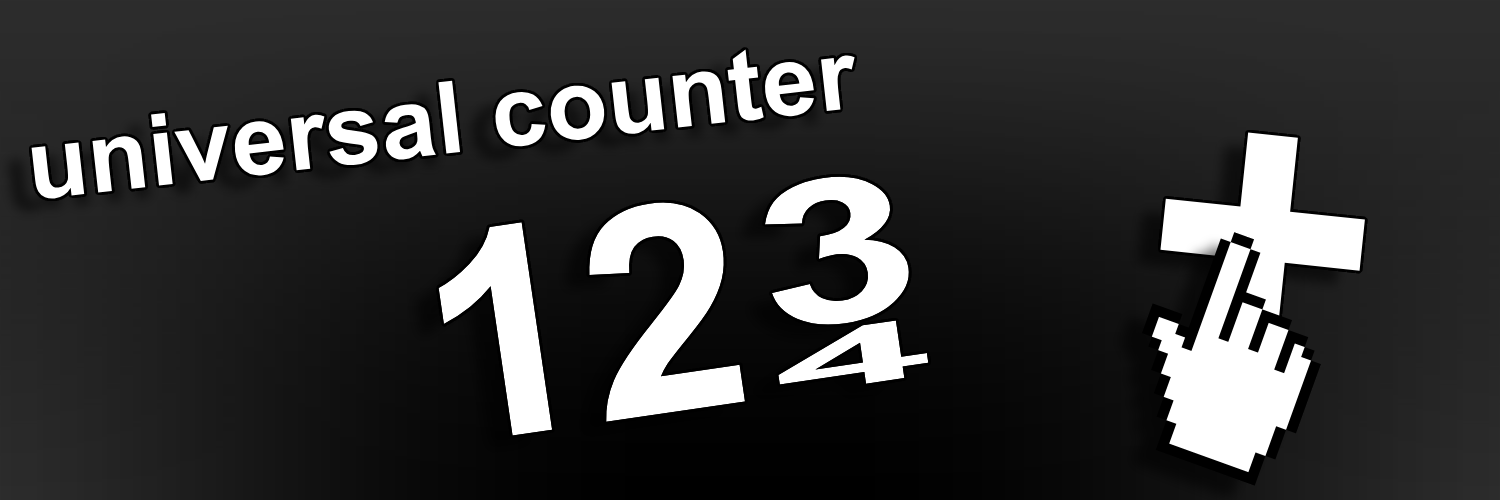
<style>
.page{position:relative;width:1500px;height:500px}
.page>*{position:absolute;margin:0}
.t1{font:100px "Arial-BoldMT";color:#ffffff}
.t2{font:400px "Arial-BoldMT";color:#ffffff}
.t3{font:201px "Arial-BoldMT";color:#ffffff;scale:1.45 1}
.t4{font:291.6px "Arial-BoldMT";color:#ffffff}
.t5{font:81px "Arial-BoldMT";color:#ffffff;scale:3.6 1}
</style>
<div class="page">
<p class="t1" style="left:31px;top:49px;width:824px;height:150px;rotate:-6deg">universal counter</p>
<p class="t2" style="left:1160px;top:132px;width:205px;height:205px;rotate:6deg">+</p>
<p class="t3" style="left:765px;top:176px;width:144px;height:149px;rotate:-8deg">3</p>
<p class="t4" style="left:438px;top:202px;width:307px;height:234px;rotate:-8deg">12</p>
<p class="t5" style="left:778px;top:320px;width:151px;height:65px;rotate:-8deg">4</p>
</div>
